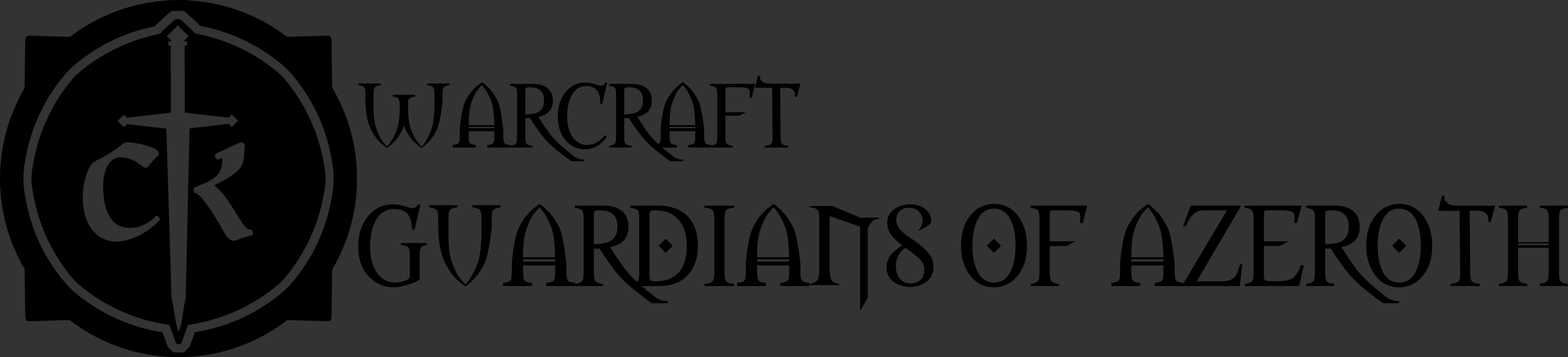
<style>
.page{position:relative;width:1568px;height:357px;background:#333333}
.page>*{position:absolute;margin:0}
.t1{font:85px "Morpheus";color:#000000}
.t2{font:106.6px "Morpheus";color:#000000}
</style>
<div class="page">
<p class="t1" style="left:358px;top:76px;width:443px;height:85px">WARCRAFT</p>
<p class="t2" style="left:358px;top:196px;width:1210px;height:115px">GUARDIANS OF AZEROTH</p>
</div>
